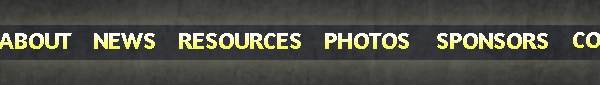
<style>
.page{position:relative;width:600px;height:85px}
.page>*{position:absolute;margin:0}
.t1{font:24px "Amaranth-Bold"}
</style>
<div class="page">
<p class="t1" style="left:0px;top:33px;width:72px;height:16px">ABOUT</p>
<p class="t1" style="left:94px;top:33px;width:61px;height:16px">NEWS</p>
<p class="t1" style="left:179px;top:33px;width:122px;height:16px">RESOURCES</p>
<p class="t1" style="left:325px;top:33px;width:84px;height:16px">PHOTOS</p>
<p class="t1" style="left:437px;top:33px;width:111px;height:16px">SPONSORS</p>
<p class="t1" style="left:573px;top:32px;width:27px;height:16px">CONTACT</p>
</div>
